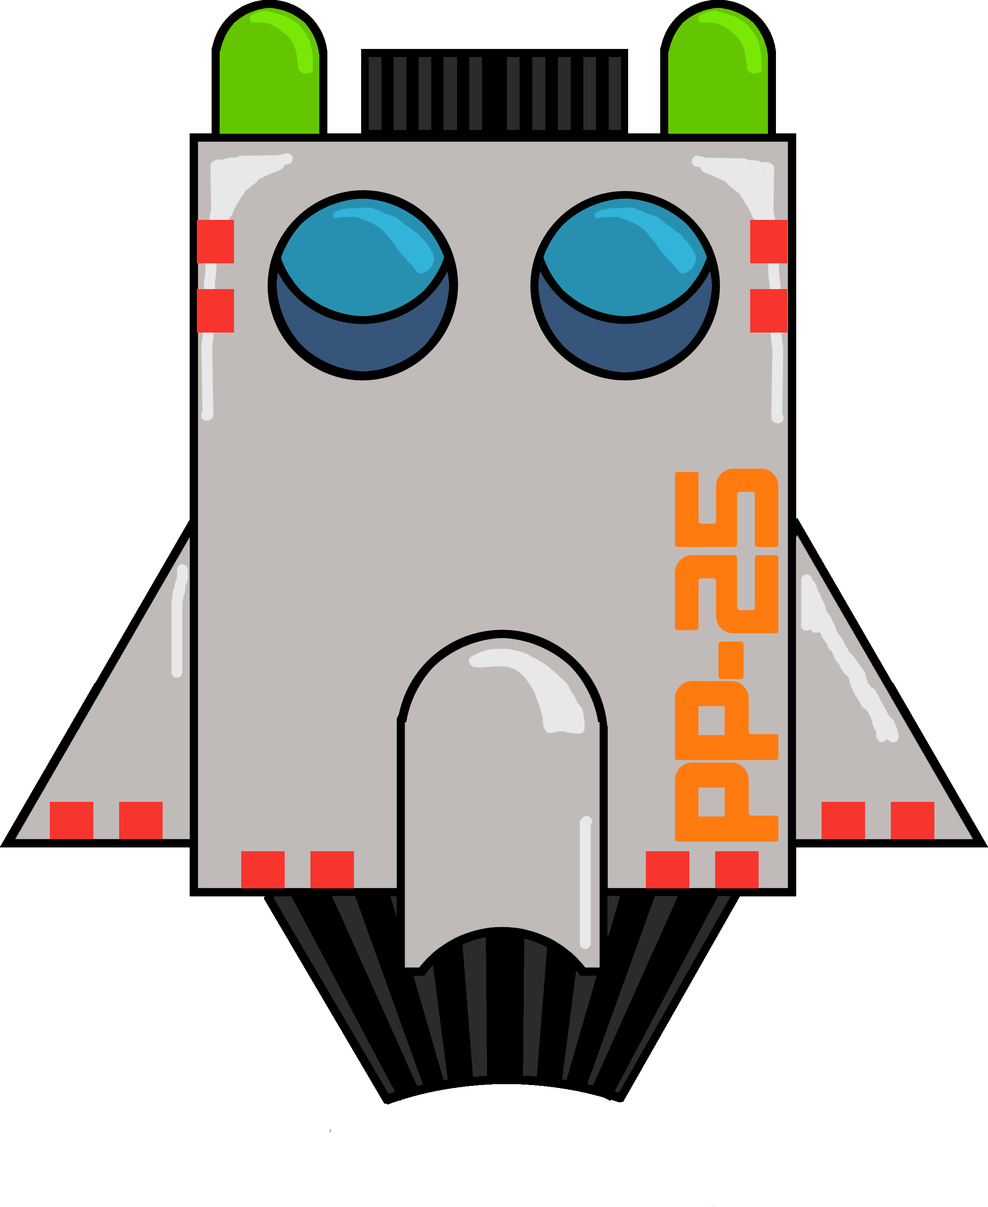
<style>
.page{position:relative;width:988px;height:1207px;background:#ffffff}
.page>*{position:absolute;margin:0}
.t1{font:147.8px "Outage-Regular";letter-spacing:-0.1em;color:#ff7b0f}
</style>
<div class="page">
<p class="t1" style="left:674px;top:469px;width:104px;height:373px;rotate:-90deg">pp-25</p>
</div>
